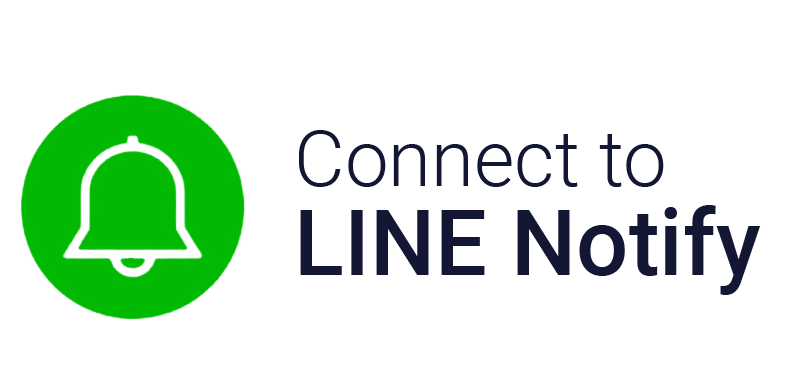
<style>
.page{position:relative;width:800px;height:381px;background:#ffffff}
.page>*{position:absolute;margin:0}
.t1{font:78px "Roboto-Light";color:#131734}
.t2{font:92.2px "Roboto-Medium";color:#131734}
</style>
<div class="page">
<p class="t1" style="left:299px;top:130px;width:365px;height:57px">Connect to</p>
<p class="t2" style="left:300px;top:205px;width:461px;height:90px">LINE Notify</p>
</div>
